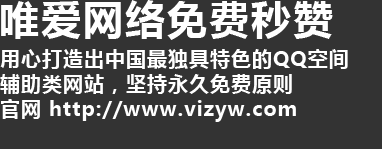
<style>
.page{position:relative;width:382px;height:149px;background:#333333}
.page>*{position:absolute;margin:0}
.t1{font:40px "MicrosoftYaHei-Bold";letter-spacing:0.05em;color:#ffffff}
.t2{font:20px/25px "MicrosoftYaHei-Bold";letter-spacing:0.05em;color:#ffffff}
</style>
<div class="page">
<p class="t1" style="left:1px;top:0px;width:332px;height:40px">唯爱网络免费秒赞</p>
<p class="t2" style="left:0px;top:49px;width:348px;height:73px">用心打造出中国最独具特色的QQ空间辅助类网站，坚持永久免费原则<br>官网 http://www.vizyw.com</p>
</div>
